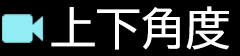
<style>
.page{position:relative;width:240px;height:56px;background:#000000}
.page>*{position:absolute;margin:0}
.t1{font:44.8px "BIZ-UDPGothic";color:#ffffff}
</style>
<div class="page">
<p class="t1" style="left:51px;top:6px;width:178px;height:44px">上下角度</p>
</div>
